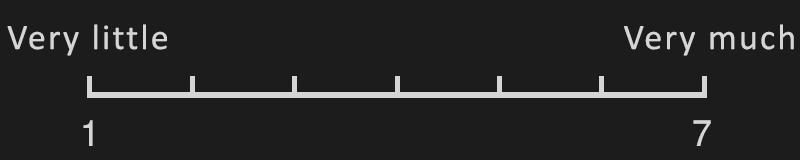
<style>
.page{position:relative;width:800px;height:160px;background:#1c1c1c}
.page>*{position:absolute;margin:0}
.t1{font:36px "Calibri";letter-spacing:0.06em;color:#d5d5d5}
.t2{font:36px "FreeSans";letter-spacing:0.06em;color:#d5d5d5;font-variant:small-caps}
</style>
<div class="page">
<p class="t1" style="left:7px;top:24px;width:160px;height:32px">Very little</p>
<p class="t1" style="left:624px;top:24px;width:170px;height:32px">Very much</p>
<p class="t2" style="left:83px;top:120px;width:10px;height:26px">1</p>
<p class="t2" style="left:693px;top:120px;width:18px;height:26px">7</p>
</div>
